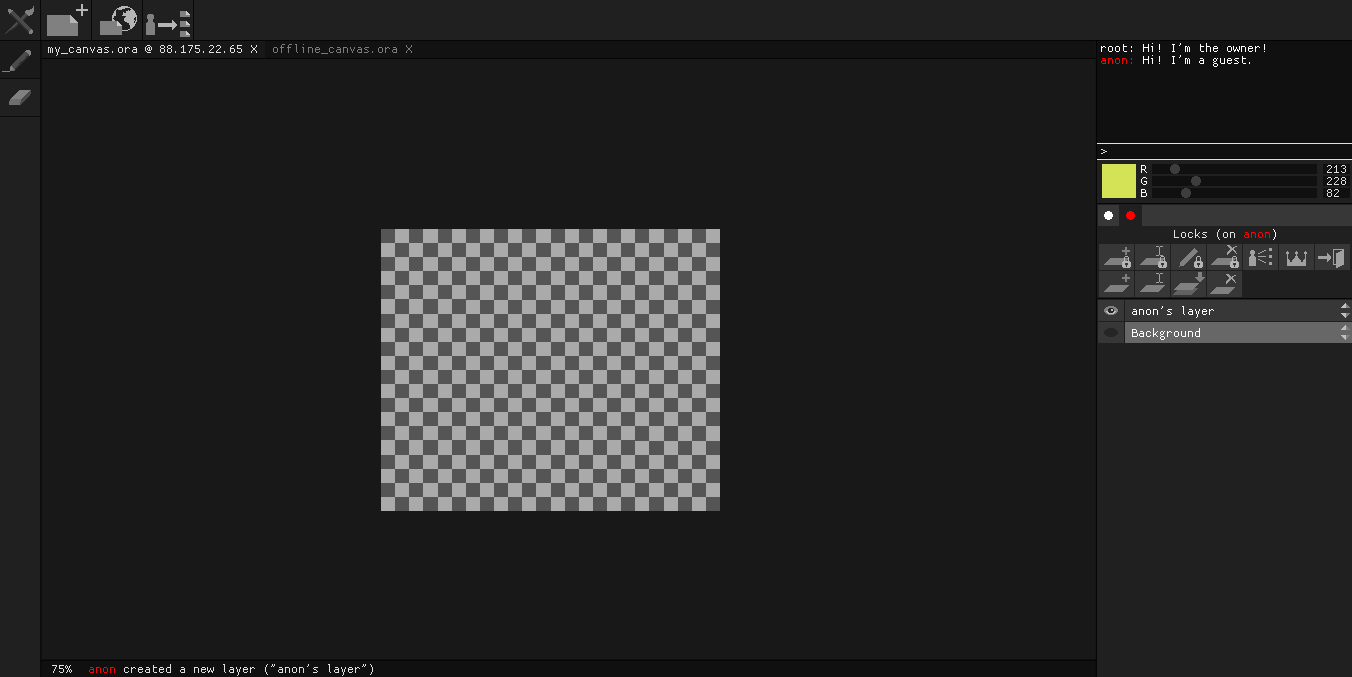
<style>
.page{position:relative;width:1352px;height:677px;background:#181818}
.page>*{position:absolute;margin:0}
.t1{font:16px "basis33";color:#e1e1e1}
.t2{font:16px "basis33";color:#7b7b7b}
.t3{font:16px/12px "basis33";color:#ffffff}
.t4{font:16px/12px "basis33";color:#ff0000}
.t5{font:16px/12px "basis33";color:#fffbfb}
.t6{font:16px/12px "basis33";color:#dedede}
.t7{font:16px "basis33";color:#ff0000}
.t8{font:16px "basis33";color:#ffffff}
.t9{font:16px "basis33";color:#fe0000}
</style>
<div class="page">
<p class="t1" style="left:48px;top:45px;width:209px;height:11px">my_canvas.ora @ 88.175.22.65 X</p>
<p class="t2" style="left:273px;top:44px;width:139px;height:10px">offline_canvas.ora X</p>
<p class="t3" style="left:1101px;top:43px;width:164px;height:24px">root: Hi! I’m the owner!<br><span class="t4">anon:</span> Hi! I’m a guest.</p>
<p class="t1" style="left:1101px;top:149px;width:6px;height:5px">&gt;</p>
<p class="t5" style="left:1141px;top:165px;width:6px;height:32px;text-align:center">R<br>G<br>B</p>
<p class="t6" style="left:1327px;top:165px;width:19px;height:32px">213<br>228<br>82</p>
<p class="t1" style="left:1174px;top:229px;width:102px;height:11px">Locks (on <span class="t7">anon</span><span class="t8">)</span></p>
<p class="t8" style="left:1132px;top:306px;width:82px;height:12px">anon’s layer</p>
<p class="t8" style="left:1132px;top:328px;width:68px;height:12px">Background</p>
<p class="t1" style="left:52px;top:665px;width:20px;height:8px">75%</p>
<p class="t1" style="left:89px;top:664px;width:284px;height:12px"><span class="t9">anon </span>created a new layer (”anon’s layer”)</p>
</div>
